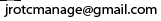
<style>
.page{position:relative;width:161px;height:21px;background:#ffffff}
.page>*{position:absolute;margin:0}
.t1{font:14px "MyriadPro-Regular";color:#000000;scale:1.05 1}
</style>
<div class="page">
<p class="t1" style="left:4px;top:4px;width:153px;height:13px">jrotcmanage@gmail.com</p>
</div>
